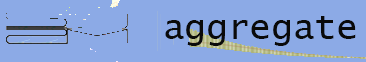
<style>
.page{position:relative;width:366px;height:62px;background:#8caae6}
.page>*{position:absolute;margin:0}
.t1{font:36px "LucidaConsole";color:#0a0a0a}
</style>
<div class="page">
<p class="t1" style="left:165px;top:16px;width:191px;height:30px">aggregate</p>
</div>
